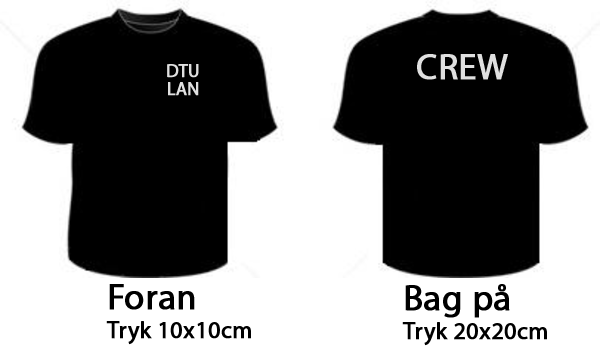
<style>
.page{position:relative;width:600px;height:350px;background:#ffffff}
.page>*{position:absolute;margin:0}
.t1{font:36px "MyriadPro-Regular";color:#e0e0e0;font-weight:bold}
.t2{font:18px/18px "MyriadPro-Regular";color:#e0e0e0;font-weight:bold}
.t3{font:24px "MyriadPro-Regular";color:#000000;font-weight:bold}
.t4{font:36px "MyriadPro-Regular";color:#000000;font-weight:bold}
</style>
<div class="page">
<p class="t1" style="left:417px;top:54px;width:91px;height:26px">CREW</p>
<p class="t2" style="left:167px;top:64px;width:32px;height:32px;text-align:center">DTU<br>LAN</p>
<p class="t3" style="left:106px;top:284px;width:145px;height:61px"><span class="t4">Foran<br></span>Tryk 10x10cm</p>
<p class="t3" style="left:402px;top:284px;width:145px;height:62px"><span class="t4">Bag på<br></span>Tryk 20x20cm</p>
</div>
